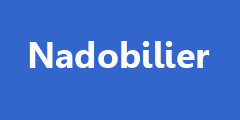
<style>
.page{position:relative;width:240px;height:120px;background:#3366cc}
.page>*{position:absolute;margin:0}
.t1{font:36px "Leelawadee-Bold";color:#fdfcfc}
</style>
<div class="page">
<p class="t1" style="left:29px;top:41px;width:181px;height:27px">Nadobilier</p>
</div>
